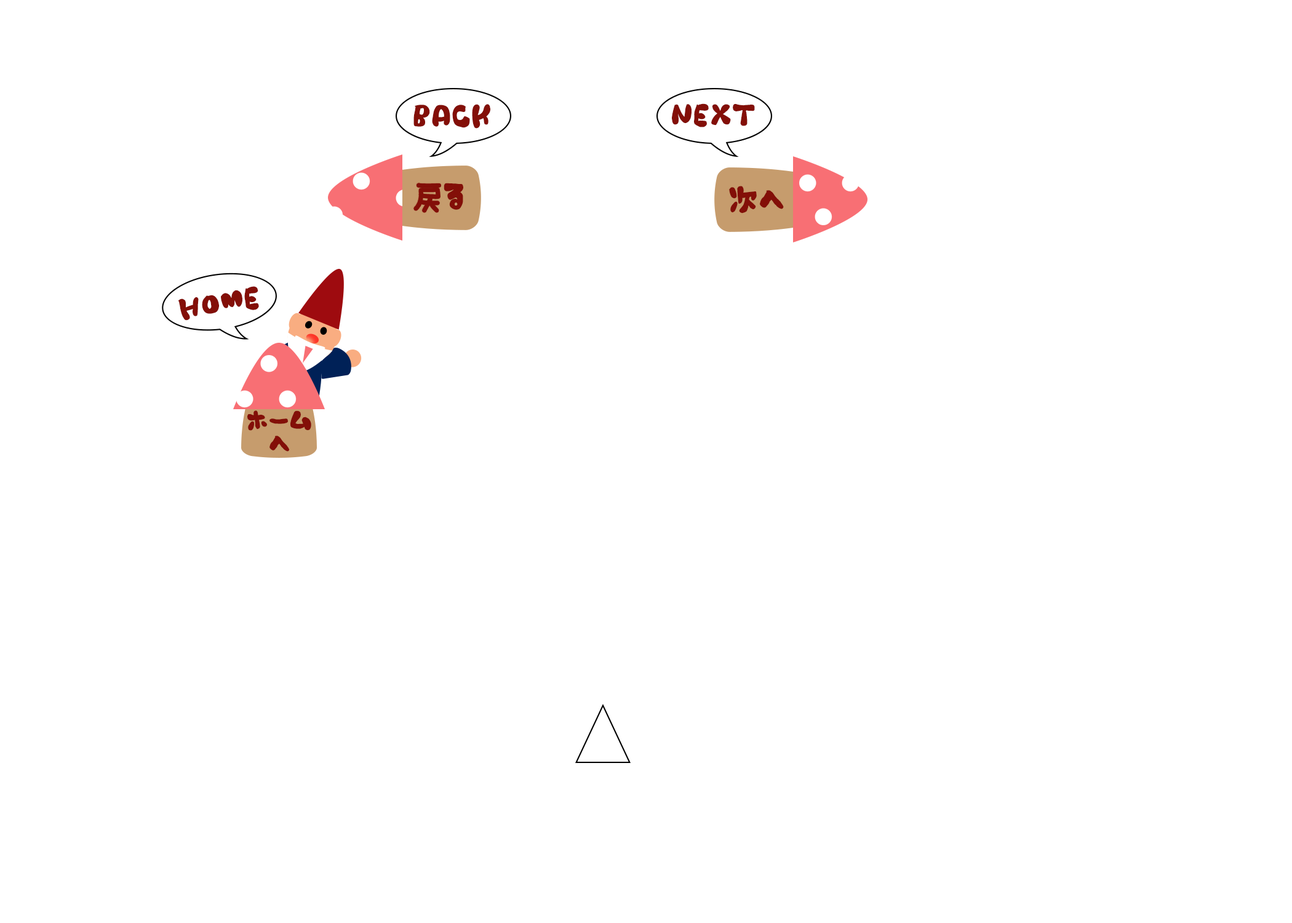
<style>
.page{position:relative;width:1292px;height:923px;background:#ffffff}
.page>*{position:absolute;margin:0}
.t1{font:25.6px "Mikiyu-Font-Mokomor-kuro";color:#830f08;text-transform:uppercase}
.t2{font:35.9px "Mikiyu-Font-NEW-PENJI--P-";color:#830f08;font-weight:bold}
.t3{font:30.8px "Mikiyu-Font-Mokomor-kuro";color:#830f08;font-weight:bold}
.t4{font:30.8px "Mikiyu-Font-Mokomor-kuro";color:#830f08;text-transform:uppercase}
.t5{font:25.6px/23.1px "Mikiyu-Font-Mokomor-kuro";color:#830f08;text-transform:uppercase}
</style>
<div class="page">
<p class="t1" style="left:413px;top:104px;width:77px;height:25px">back</p>
<p class="t1" style="left:672px;top:103px;width:83px;height:24px">next</p>
<p class="t2" style="left:414px;top:183px;width:27px;height:29px">戻</p>
<p class="t3" style="left:444px;top:183px;width:19px;height:27px">る</p>
<p class="t4" style="left:729px;top:186px;width:55px;height:27px">次へ</p>
<p class="t1" style="left:178px;top:286px;width:81px;height:35px;rotate:-10deg">home</p>
<p class="t5" style="left:247px;top:410px;width:64px;height:42px;text-align:center">ホーム<br>へ</p>
</div>
